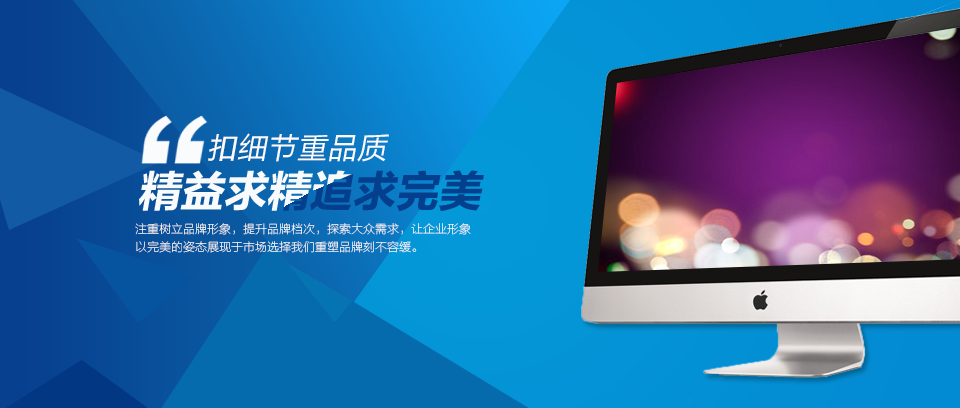
<style>
.page{position:relative;width:960px;height:408px}
.page>*{position:absolute;margin:0}
.t1{font:30px "FZLTH_YS_GBK";color:#fafbfc;font-style:italic}
.t2{font:12px/18px "FZLTCXHJW--GB1-0";color:#f9f9f9}
</style>
<div class="page">
<p class="t1" style="left:208px;top:133px;width:181px;height:29px">扣细节重品质</p>
<p class="t2" style="left:135px;top:223px;width:336px;height:30px">注重树立品牌形象，提升品牌档次，探索大众需求，让企业形象<br>以完美的姿态展现于市场选择我们重塑品牌刻不容缓。</p>
</div>
